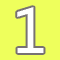
<style>
.page{position:relative;width:60px;height:60px;background:#eeff5c}
.page>*{position:absolute;margin:0}
.t1{font:60px "MicrosoftYaHei";color:#ffffff}
</style>
<div class="page">
<p class="t1" style="left:17px;top:7px;width:27px;height:46px">1</p>
</div>
